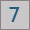
<style>
.page{position:relative;width:30px;height:30px;background:#c9c7c7}
.page>*{position:absolute;margin:0}
.t1{font:20.8px "Menlo-Regular";color:#205e7b}
</style>
<div class="page">
<p class="t1" style="left:9px;top:7px;width:11px;height:15px">7</p>
</div>
